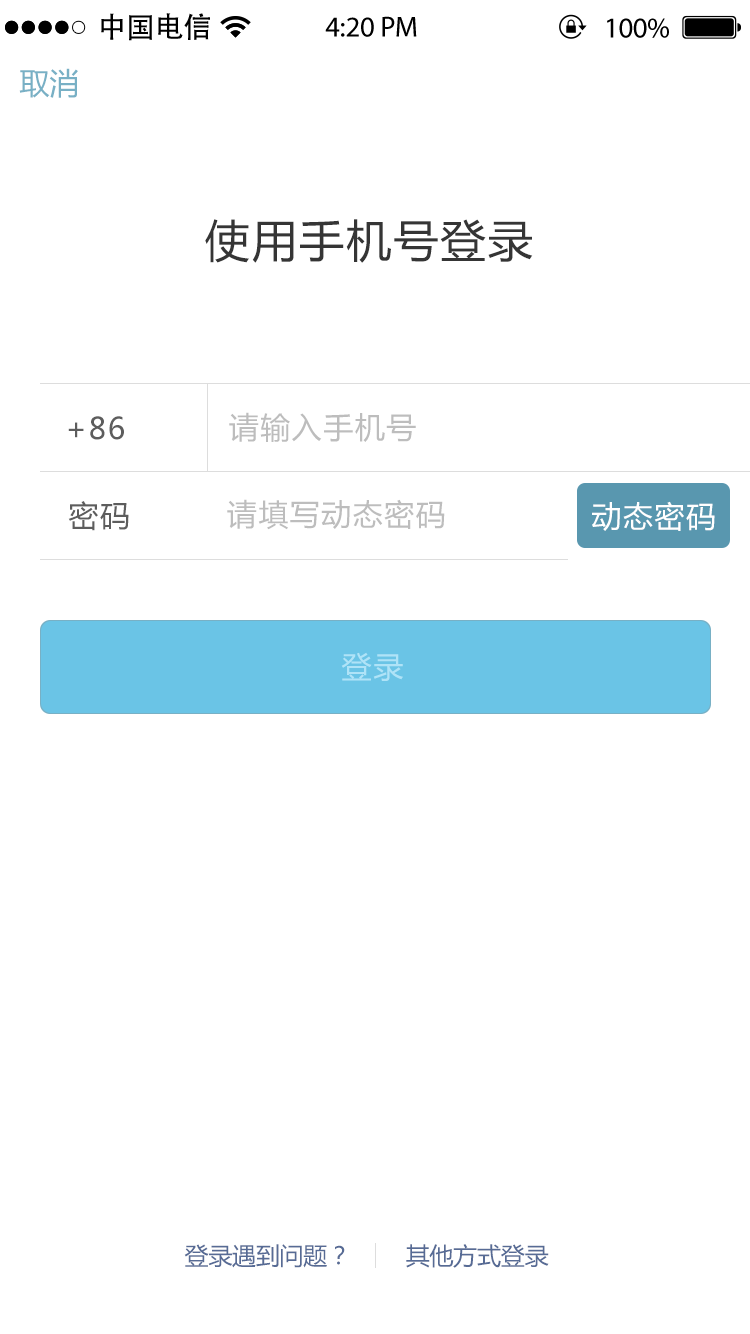
<style>
.page{position:relative;width:750px;height:1334px;background:#ffffff}
.page>*{position:absolute;margin:0}
.t1{font:28.8px "AdobeHeitiStd-Regular";color:#000000}
.t2{font:28.8px "MyriadPro-Regular";color:#000000}
.t3{font:30px "MicrosoftYaHei";color:#78b0c5}
.t4{font:45px "MicrosoftYaHei";letter-spacing:0.05em;color:#353535}
.t5{font:30px "MicrosoftYaHei";letter-spacing:0.05em;color:#bdbdbd}
.t6{font:30px "MicrosoftYaHei";letter-spacing:0.05em;color:#5d5d5d}
.t7{font:30px "MicrosoftYaHei";letter-spacing:0.05em;color:#ffffff}
.t8{font:30px "MicrosoftYaHei";letter-spacing:0.05em;color:#afe3f7}
.t9{font:24px "MicrosoftYaHei";letter-spacing:-0.01em;color:#576b95}
</style>
<div class="page">
<p class="t1" style="left:101px;top:13px;width:109px;height:28px">中国电信</p>
<p class="t2" style="left:325px;top:16px;width:92px;height:21px">4:20 PM</p>
<p class="t2" style="left:607px;top:18px;width:62px;height:20px">100%</p>
<p class="t3" style="left:19px;top:68px;width:59px;height:30px">取消</p>
<p class="t4" style="left:205px;top:219px;width:328px;height:44px">使用手机号登录</p>
<p class="t5" style="left:229px;top:412px;width:187px;height:30px">请输入手机号</p>
<p class="t6" style="left:68px;top:416px;width:56px;height:24px">+86</p>
<p class="t6" style="left:68px;top:501px;width:61px;height:30px">密码</p>
<p class="t5" style="left:227px;top:499px;width:218px;height:31px">请填写动态密码</p>
<p class="t7" style="left:592px;top:501px;width:123px;height:30px">动态密码</p>
<p class="t8" style="left:341px;top:652px;width:62px;height:29px">登录</p>
<p class="t9" style="left:184px;top:1244px;width:365px;height:24px">登录遇到问题？        其他方式登录</p>
</div>
